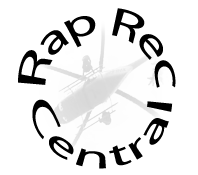
<style>
.page{position:relative;width:198px;height:175px;background:#ffffff}
.page>*{position:absolute;margin:0}
.t1{font:30px "MyriadPro-Regular";color:#000000}
</style>
<div class="page">
<p class="t1" style="left:18px;top:8px;width:158px;height:80px">Rap Rec</p>
<p class="t1" style="left:32px;top:99px;width:141px;height:70px">Central</p>
</div>
